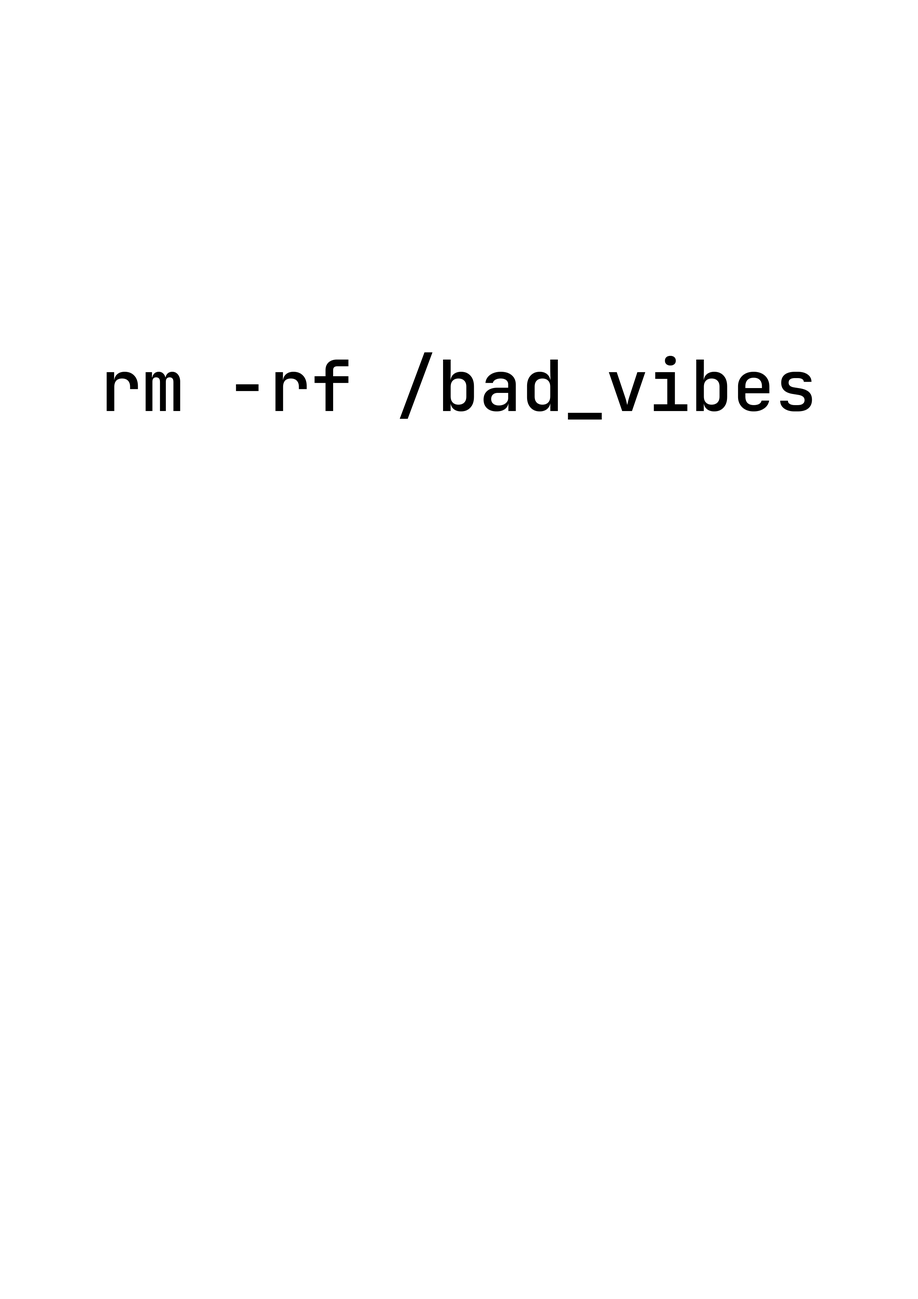
<style>
.page{position:relative;width:918px;height:1299px;background:#ffffff}
.page>*{position:absolute;margin:0}
.t1{font:70.5px "JetBrainsMono-SemiBold";color:#000000}
</style>
<div class="page">
<p class="t1" style="left:107px;top:352px;width:705px;height:67px">rm -rf /bad_vibes</p>
</div>
